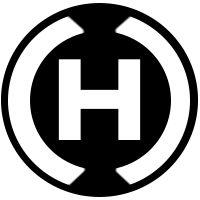
<style>
.page{position:relative;width:200px;height:200px;background:#ffffff}
.page>*{position:absolute;margin:0}
.t1{font:107.3px "Formula1-Display-Bold";color:#ffffff}
</style>
<div class="page">
<p class="t1" style="left:58px;top:59px;width:83px;height:81px">H</p>
</div>
